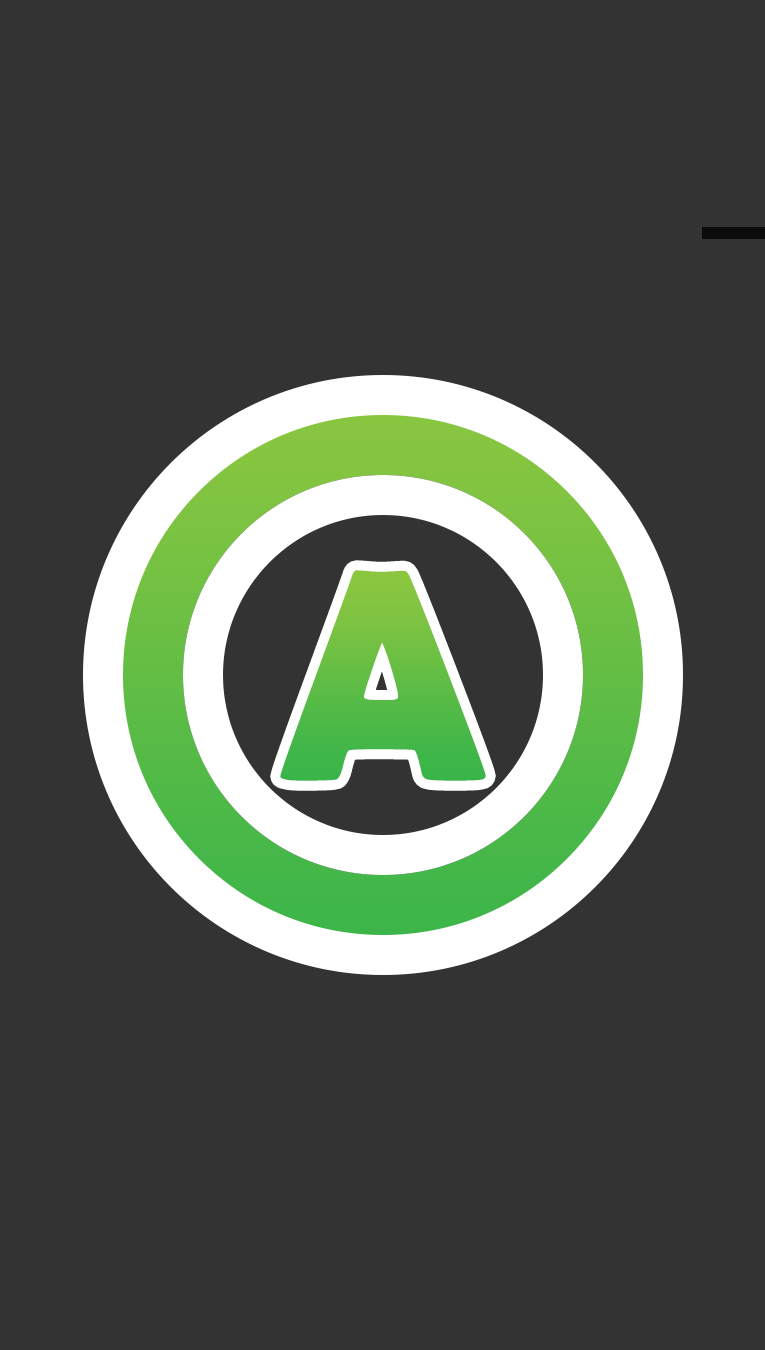
<style>
.page{position:relative;width:765px;height:1350px;background:#333333}
.page>*{position:absolute;margin:0}
.t1{font:300px "BerlinSansFBDemi-Bold";letter-spacing:0.2em}
</style>
<div class="page">
<p class="t1" style="left:280px;top:570px;width:206px;height:211px">A</p>
</div>
